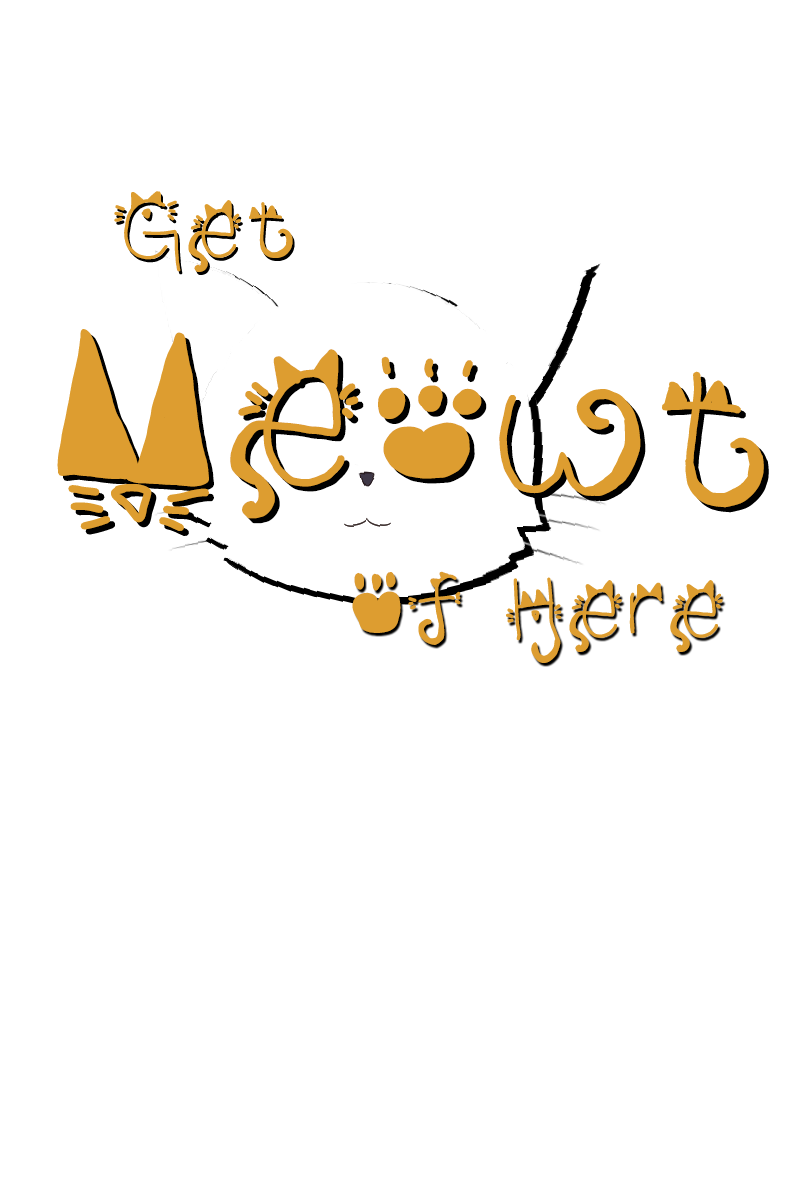
<style>
.page{position:relative;width:800px;height:1200px;background:#ffffff}
.page>*{position:absolute;margin:0}
.t1{font:83.3px "Kitty_face";color:#dd9d30}
.t2{font:200px "Kitty_face";color:#dd9d30}
</style>
<div class="page">
<p class="t1" style="left:114px;top:191px;width:179px;height:81px">Get</p>
<p class="t2" style="left:57px;top:329px;width:707px;height:202px;rotate:3deg">Meowt</p>
<p class="t2" style="left:62px;top:334px;width:707px;height:202px;rotate:3deg">Meowt</p>
<p class="t1" style="left:352px;top:571px;width:371px;height:92px">Of Here</p>
</div>
